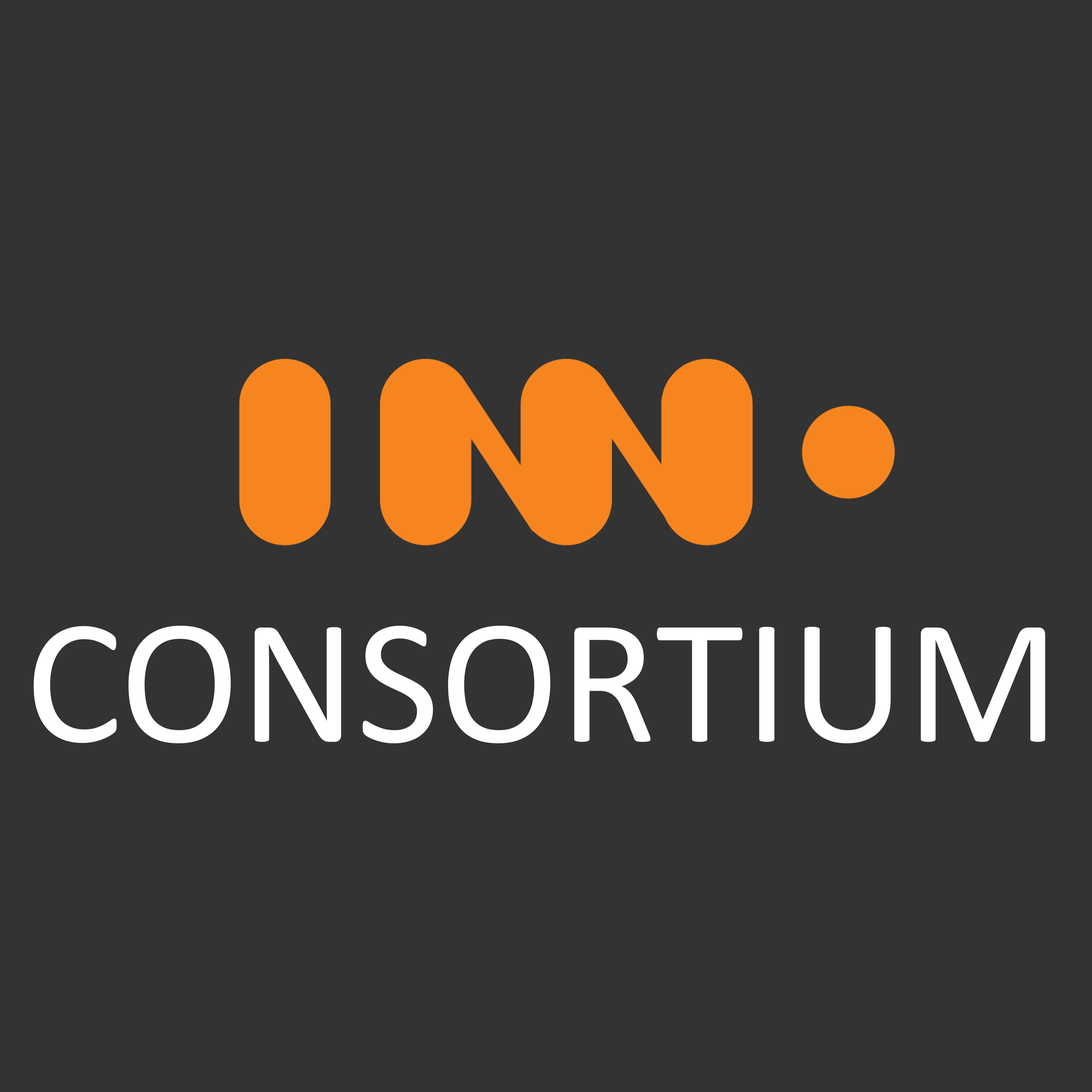
<style>
.page{position:relative;width:1092px;height:1092px;background:#333333}
.page>*{position:absolute;margin:0}
.t1{font:180.4px "Calibri";color:#ffffff}
</style>
<div class="page">
<p class="t1" style="left:33px;top:626px;width:1012px;height:117px">CONSORTIUM</p>
</div>
